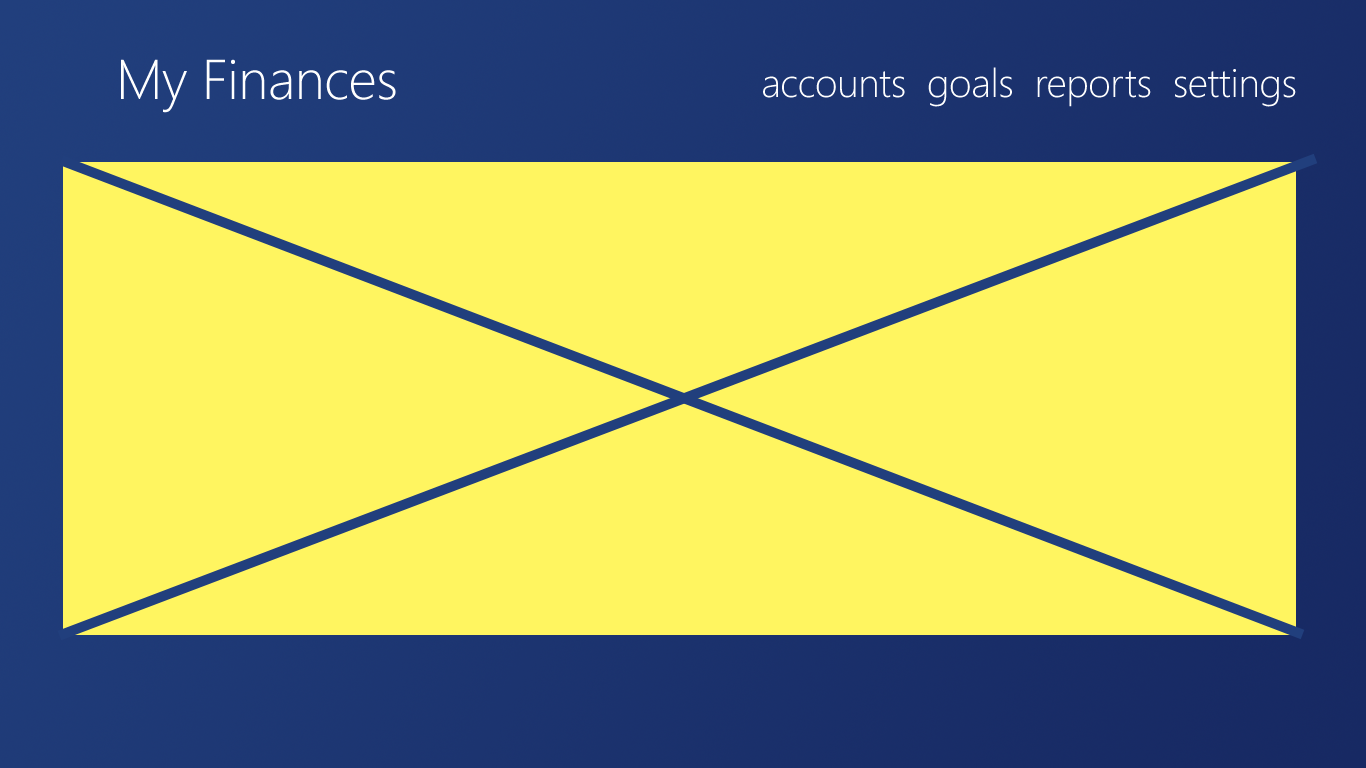
<style>
.page{position:relative;width:1366px;height:768px;background:#fff560}
.page>*{position:absolute;margin:0}
.t1{font:56px "SegoeUI-Light";letter-spacing:-0.01em;color:#ffffff}
.t2{font:40px "SegoeUI-Light";letter-spacing:-0.01em;color:#ffffff}
</style>
<div class="page">
<p class="t1" style="left:121px;top:59px;width:275px;height:54px">My Finances</p>
<p class="t2" style="left:763px;top:67px;width:533px;height:40px">accounts  goals  reports  settings</p>
</div>
